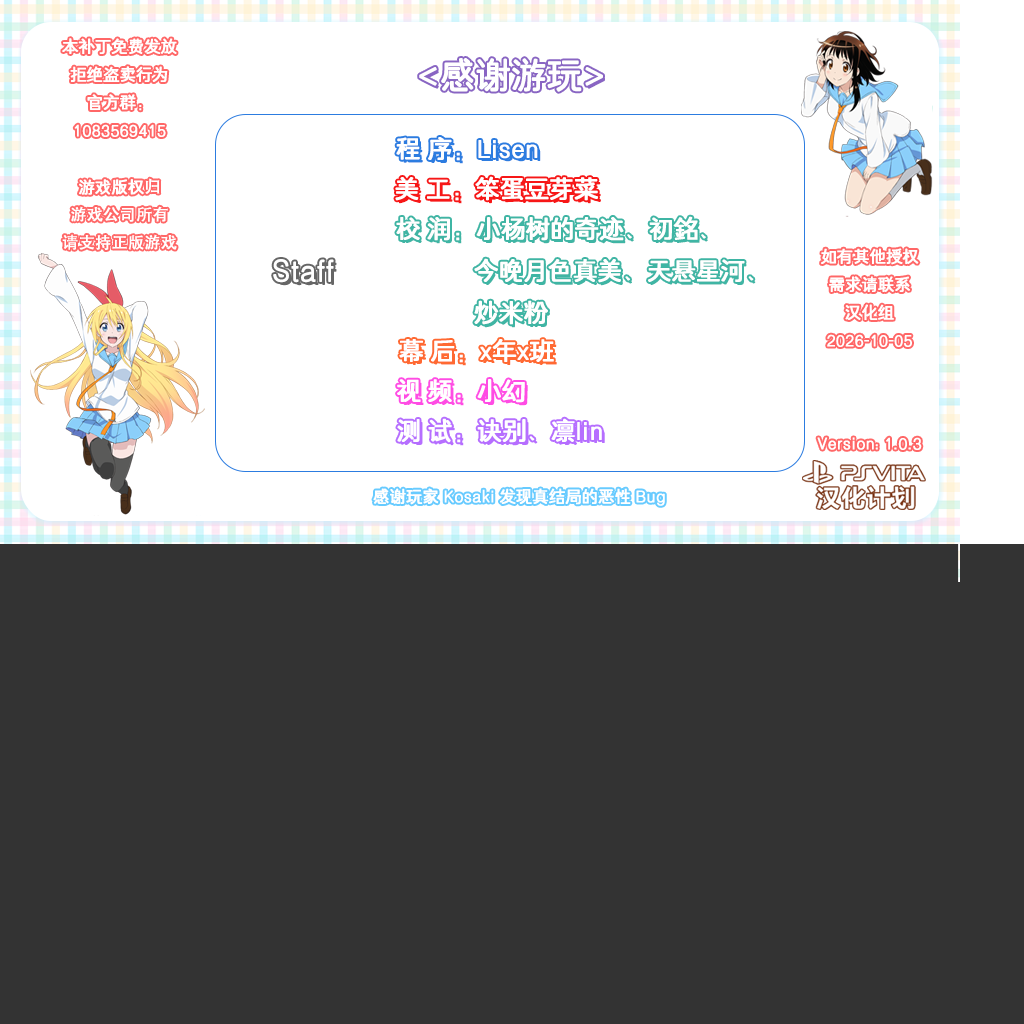
<style>
.page{position:relative;width:1024px;height:1024px;background:#333333}
.page>*{position:absolute;margin:0}
.t1{font:34.7px "SJluoliheijianfancu";color:#ffffff;font-weight:bold}
.t2{font:24px "SJluoliheijianfancu";color:#ffffff;font-weight:bold}
.t3{font:24px "SJluoliheijianfancu";color:#2c7ce0;font-weight:bold}
.t4{font:24px "SJluoliheijianfancu";font-weight:bold}
.t5{font:29.3px "SJluoliheijianfancu";color:#ffffff;font-weight:bold}
.t6{font:29.3px "SJluoliheijianfancu";color:#666666;font-weight:bold}
.t7{font:16px "SJluoliheijianfancu";color:#ffffff;font-weight:bold}
</style>
<div class="page">
<p class="t1" style="left:419px;top:58px;width:184px;height:34px">&lt;感谢游玩&gt;</p>
<p class="t2" style="left:396px;top:137px;width:142px;height:24px">程 序：Lisen</p>
<p class="t3" style="left:399px;top:140px;width:142px;height:24px">程 序：Lisen</p>
<p class="t2" style="left:395px;top:176px;width:203px;height:25px">美 工：笨蛋豆芽菜</p>
<p class="t4" style="left:398px;top:219px;width:358px;height:109px">校 润：小杨树的奇迹、初銘、<br>            今晚月色真美、天悬星河、<br>            炒米粉</p>
<p class="t5" style="left:273px;top:259px;width:61px;height:24px">Staff</p>
<p class="t6" style="left:276px;top:262px;width:61px;height:24px">Staff</p>
<p class="t2" style="left:399px;top:339px;width:155px;height:24px">幕 后：x年x班</p>
<p class="t4" style="left:402px;top:342px;width:155px;height:24px">幕 后：x年x班</p>
<p class="t2" style="left:397px;top:379px;width:128px;height:24px">视 频：小幻</p>
<p class="t4" style="left:400px;top:382px;width:128px;height:24px">视 频：小幻</p>
<p class="t2" style="left:397px;top:418px;width:205px;height:25px">测 试：诀别、凛lin</p>
<p class="t4" style="left:400px;top:421px;width:205px;height:25px">测 试：诀别、凛lin</p>
<p class="t7" style="left:817px;top:437px;width:105px;height:13px">Version: 1.0.3</p>
<p class="t7" style="left:373px;top:488px;width:292px;height:18px">感谢玩家 Kosaki 发现真结局的恶性 Bug</p>
</div>
